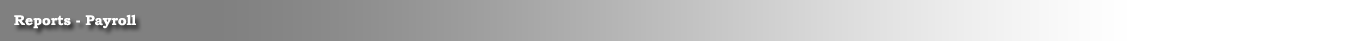
<style>
.page{position:relative;width:1350px;height:41px}
.page>*{position:absolute;margin:0}
.t1{font:14px "BookmanOldStyle-Bold";color:#ffffff}
</style>
<div class="page">
<p class="t1" style="left:14px;top:14px;width:122px;height:15px">Reports - Payroll</p>
</div>
